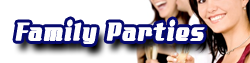
<style>
.page{position:relative;width:250px;height:63px;background:#ffffff}
.page>*{position:absolute;margin:0}
.t1{font:35.2px "AddCityboyNormal";letter-spacing:0.05em;color:#fefefd;font-weight:bold;scale:0.61 1}
</style>
<div class="page">
<p class="t1" style="left:15px;top:19px;width:190px;height:25px">Family Parties</p>
</div>
